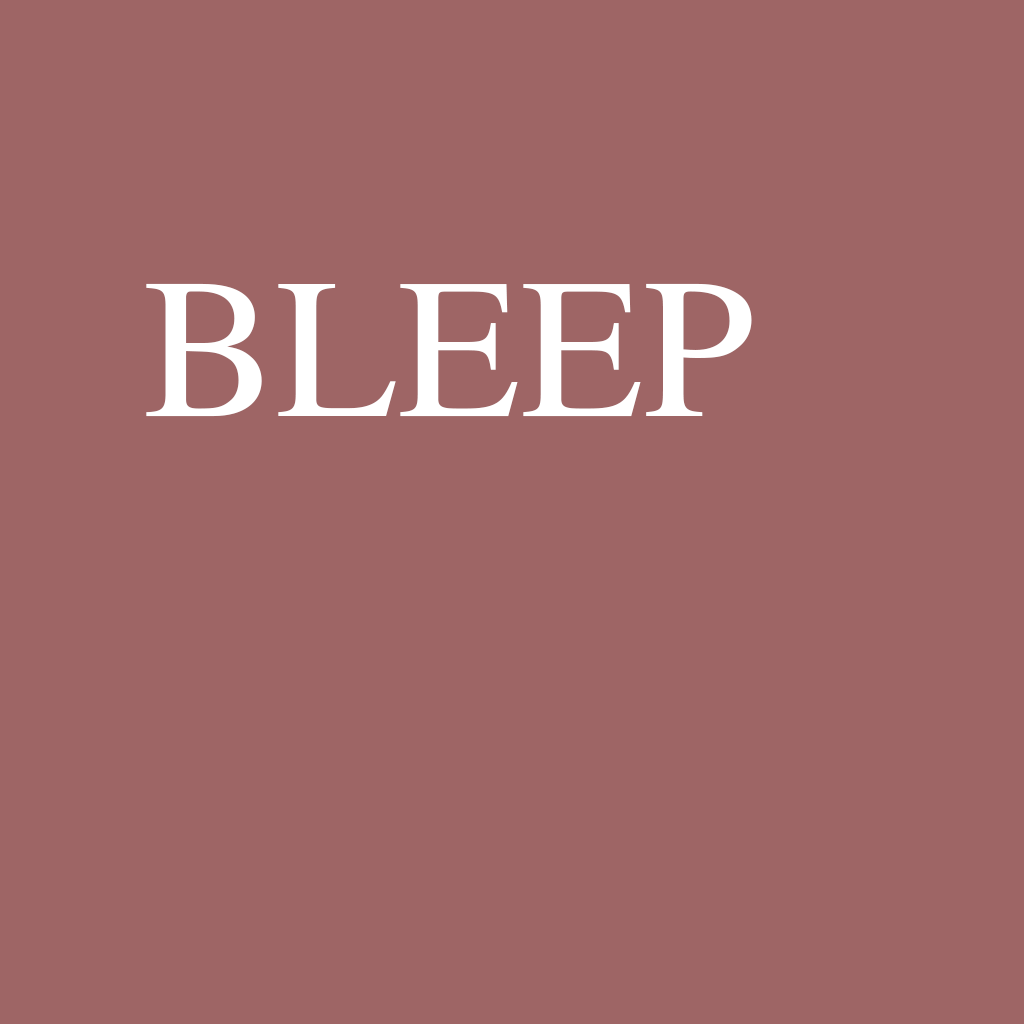
<style>
.page{position:relative;width:1024px;height:1024px;background:#9e6565}
.page>*{position:absolute;margin:0}
.t1{font:200px "XITS";color:#ffffff}
</style>
<div class="page">
<p class="t1" style="left:146px;top:283px;width:606px;height:134px">BLEEP</p>
</div>
